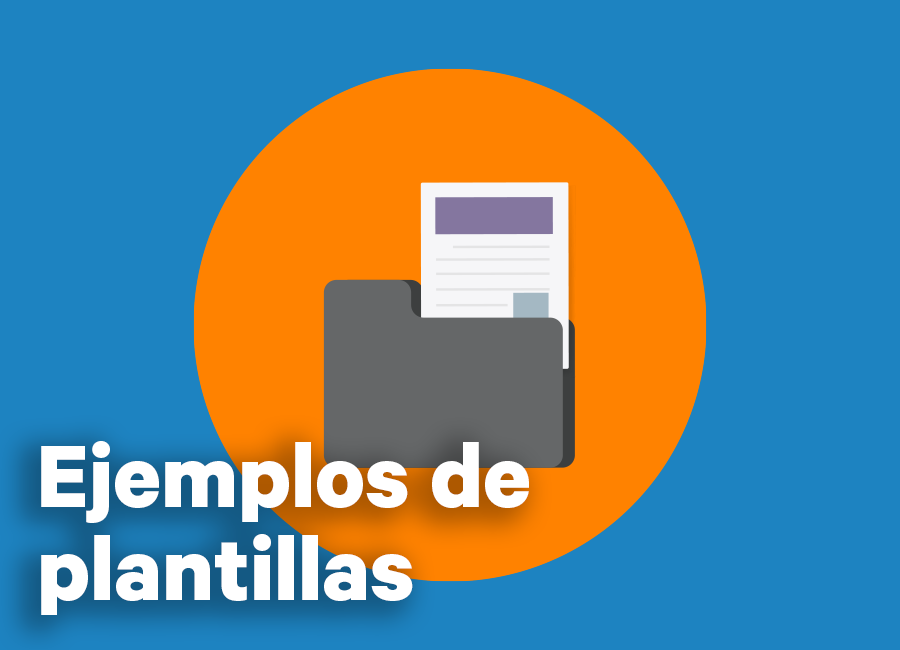
<style>
.page{position:relative;width:900px;height:650px;background:#1d83c1}
.page>*{position:absolute;margin:0}
.t1{font:100px/93px "Calibre-Bold";color:#ffffff}
</style>
<div class="page">
<p class="t1" style="left:41px;top:441px;width:488px;height:174px">Ejemplos de <br>plantillas</p>
</div>
